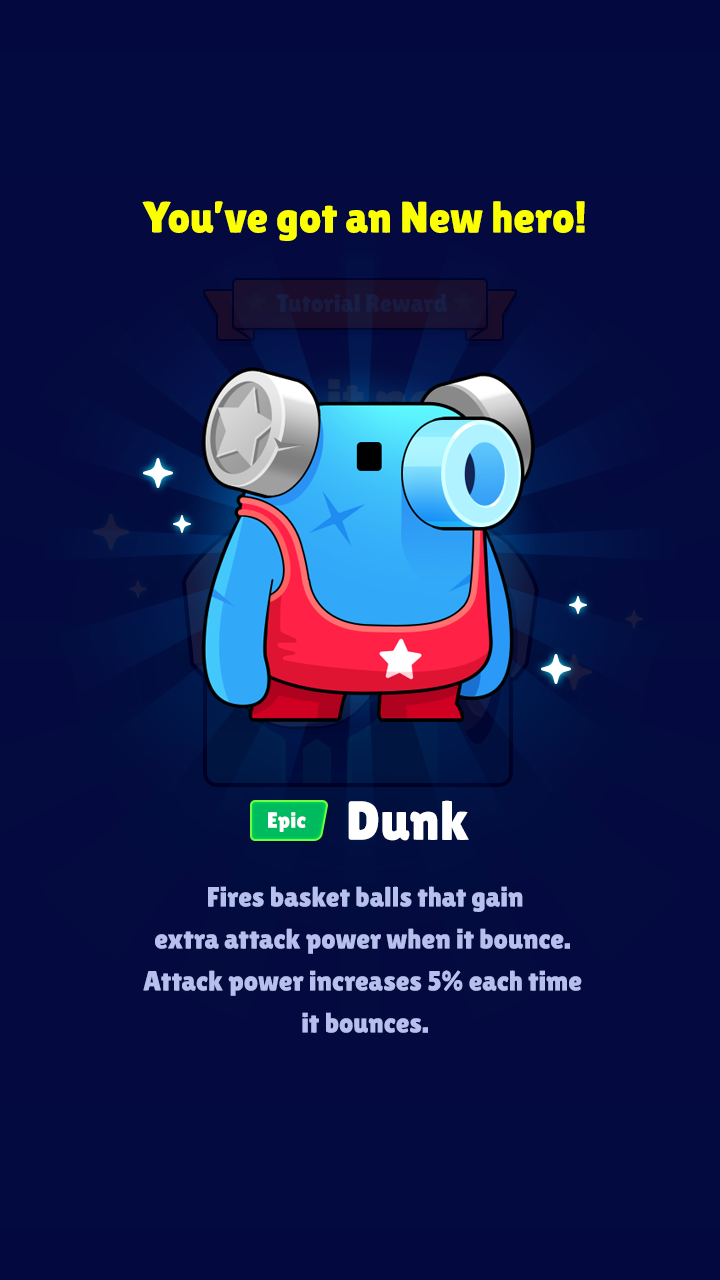
<style>
.page{position:relative;width:720px;height:1280px;background:#040a3f}
.page>*{position:absolute;margin:0}
.t1{font:44px "LilitaOne";color:#fcff00}
.t2{font:55px "LilitaOne";color:#ffffff}
.t3{font:22px "LilitaOne";color:#ffffff}
.t4{font:28px/42px "LilitaOne";color:#b6bfee}
</style>
<div class="page">
<p class="t1" style="left:142px;top:201px;width:443px;height:40px">You’ve got an New hero!</p>
<p class="t2" style="left:348px;top:800px;width:121px;height:41px">Dunk</p>
<p class="t3" style="left:268px;top:812px;width:38px;height:20px">Epic</p>
<p class="t4" style="left:143px;top:886px;width:439px;height:147px;text-align:center">Fires basket balls that gain<br>extra attack power when it bounce. <br>Attack power increases 5% each time <br>it bounces.</p>
</div>
